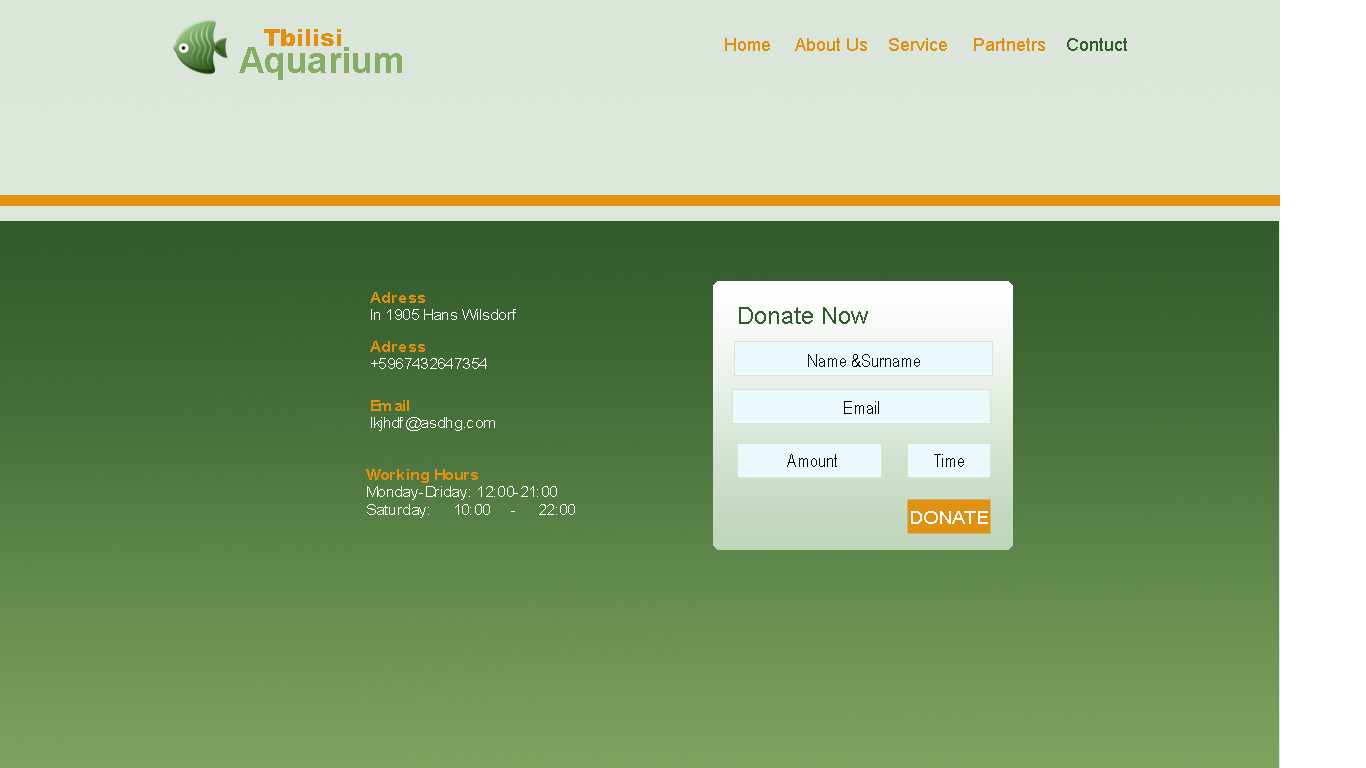
<style>
.page{position:relative;width:1366px;height:768px}
.page>*{position:absolute;margin:0}
.t1{font:23.6px "Arial-Black";color:#e09013}
.t2{font:18px "ArialMT";color:#e09013}
.t3{font:18px "ArialMT";color:#325d2c}
.t4{font:36px "Arial-BoldMT";color:#85ad66}
.t5{font:14.7px "ArialMT";color:#ffffff;scale:1.06 1}
.t6{font:14.7px "Arial-BoldMT";color:#e09013;scale:1.06 1}
.t7{font:24px "ArialMT";color:#325b2c}
.t8{font:18.2px "ArialNarrow";color:#00100f}
.t9{font:18px "ArialNarrow";color:#000000}
.t10{font:18.2px "ArialNarrow";color:#000000}
.t11{font:17.8px "ArialMT";color:#ffffff;scale:1.12 1}
</style>
<div class="page">
<p class="t1" style="left:264px;top:29px;width:77px;height:17px">Tbilisi</p>
<p class="t2" style="left:725px;top:38px;width:402px;height:13px">Home     About Us    Service     Partnetrs    <span class="t3">Contuct</span></p>
<p class="t4" style="left:239px;top:47px;width:163px;height:33px">Aquarium</p>
<p class="t5" style="left:370px;top:292px;width:146px;height:28px;text-align:justify"><span class="t6">Adress<br></span>In 1905 Hans Wilsdorf</p>
<p class="t7" style="left:739px;top:307px;width:129px;height:17px">Donate Now</p>
<p class="t5" style="left:370px;top:341px;width:117px;height:28px;text-align:justify"><span class="t6">Adress<br></span>+5967432647354</p>
<p class="t8" style="left:808px;top:354px;width:112px;height:13px">Name &amp;Surname</p>
<p class="t5" style="left:371px;top:400px;width:124px;height:31px;text-align:justify"><span class="t6">Email<br></span>lkjhdf@asdhg.com</p>
<p class="t9" style="left:844px;top:401px;width:35px;height:13px">Email</p>
<p class="t10" style="left:787px;top:454px;width:50px;height:13px">Amount</p>
<p class="t9" style="left:934px;top:454px;width:30px;height:13px">Time</p>
<p class="t5" style="left:366px;top:469px;width:209px;height:49px;text-align:justify"><span class="t6">Working Hours<br></span>Monday-Driday: 12:00-21:00 <br>Saturday: 10:00 - 22:00</p>
<p class="t11" style="left:911px;top:511px;width:77px;height:13px">DONATE</p>
</div>
